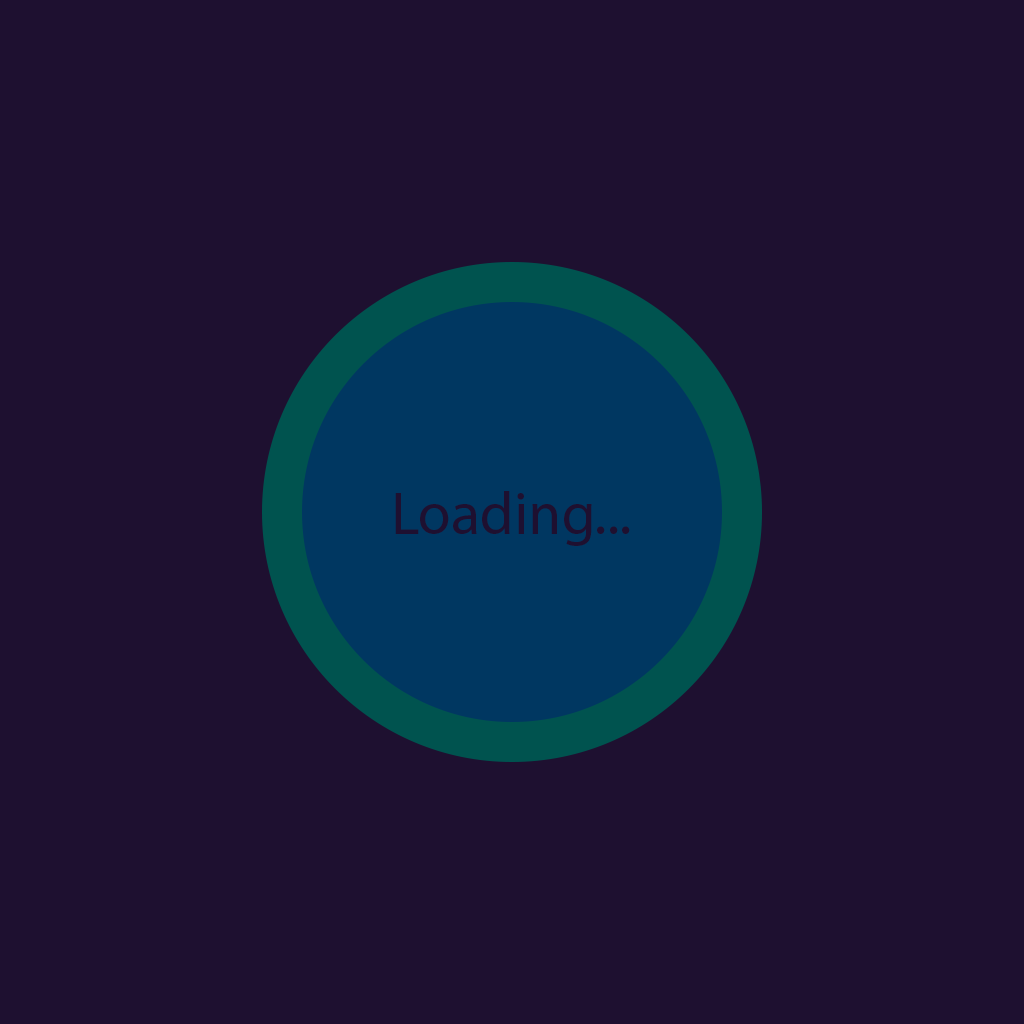
<style>
.page{position:relative;width:1024px;height:1024px;background:#1e1030}
.page>*{position:absolute;margin:0}
.t1{font:60px "MyriadPro-Regular";color:#1e1030}
</style>
<div class="page">
<p class="t1" style="left:395px;top:491px;width:235px;height:55px">Loading...</p>
</div>
